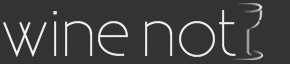
<style>
.page{position:relative;width:290px;height:64px;background:#333333}
.page>*{position:absolute;margin:0}
.t1{font:64px "Existence-Light";color:#ffffff}
</style>
<div class="page">
<p class="t1" style="left:3px;top:10px;width:233px;height:47px">wine not</p>
</div>
